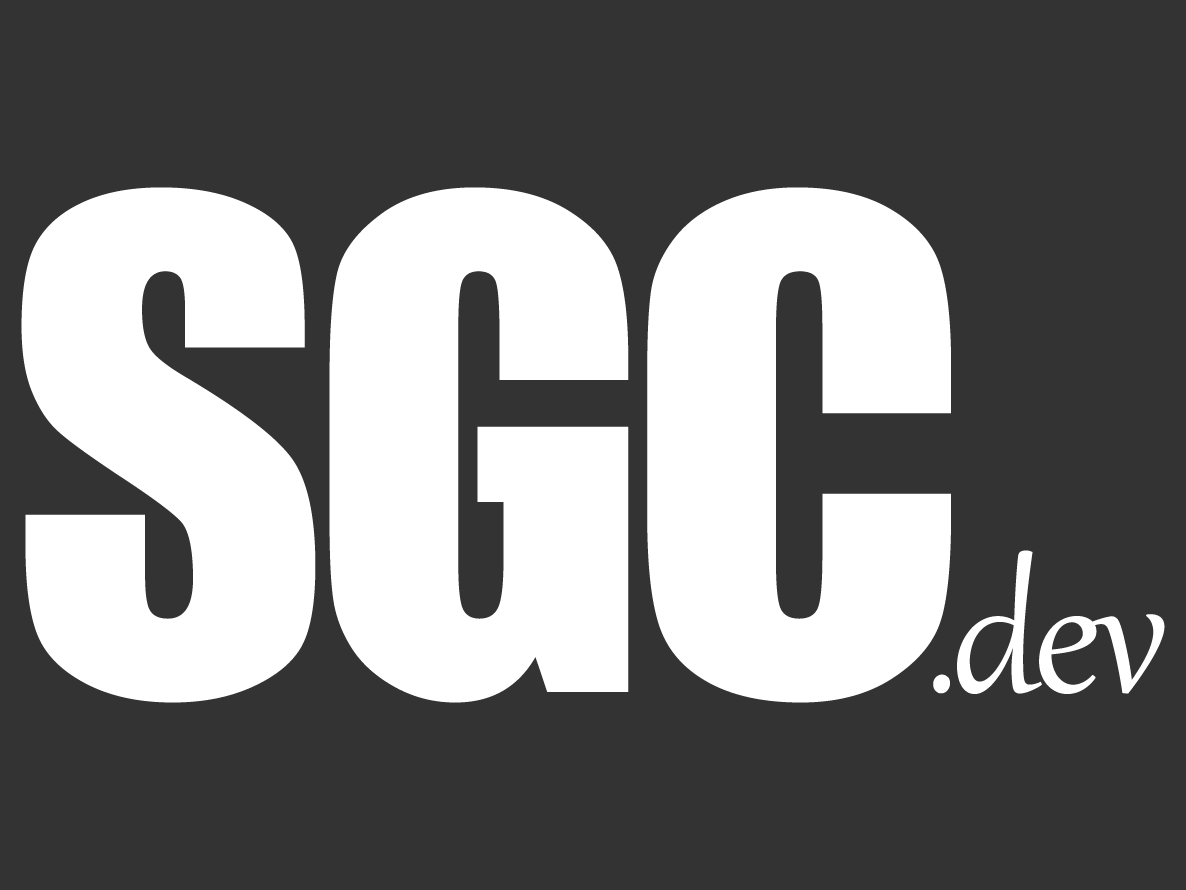
<style>
.page{position:relative;width:1186px;height:890px;background:#333333}
.page>*{position:absolute;margin:0}
.t1{font:625px "Impact";letter-spacing:-0.025em;color:#ffffff}
.t2{font:212px "Gabriola";letter-spacing:-0.025em;color:#ffffff}
</style>
<div class="page">
<p class="t1" style="left:21px;top:187px;width:930px;height:516px">SGC</p>
<p class="t2" style="left:933px;top:550px;width:232px;height:144px">.dev</p>
</div>
